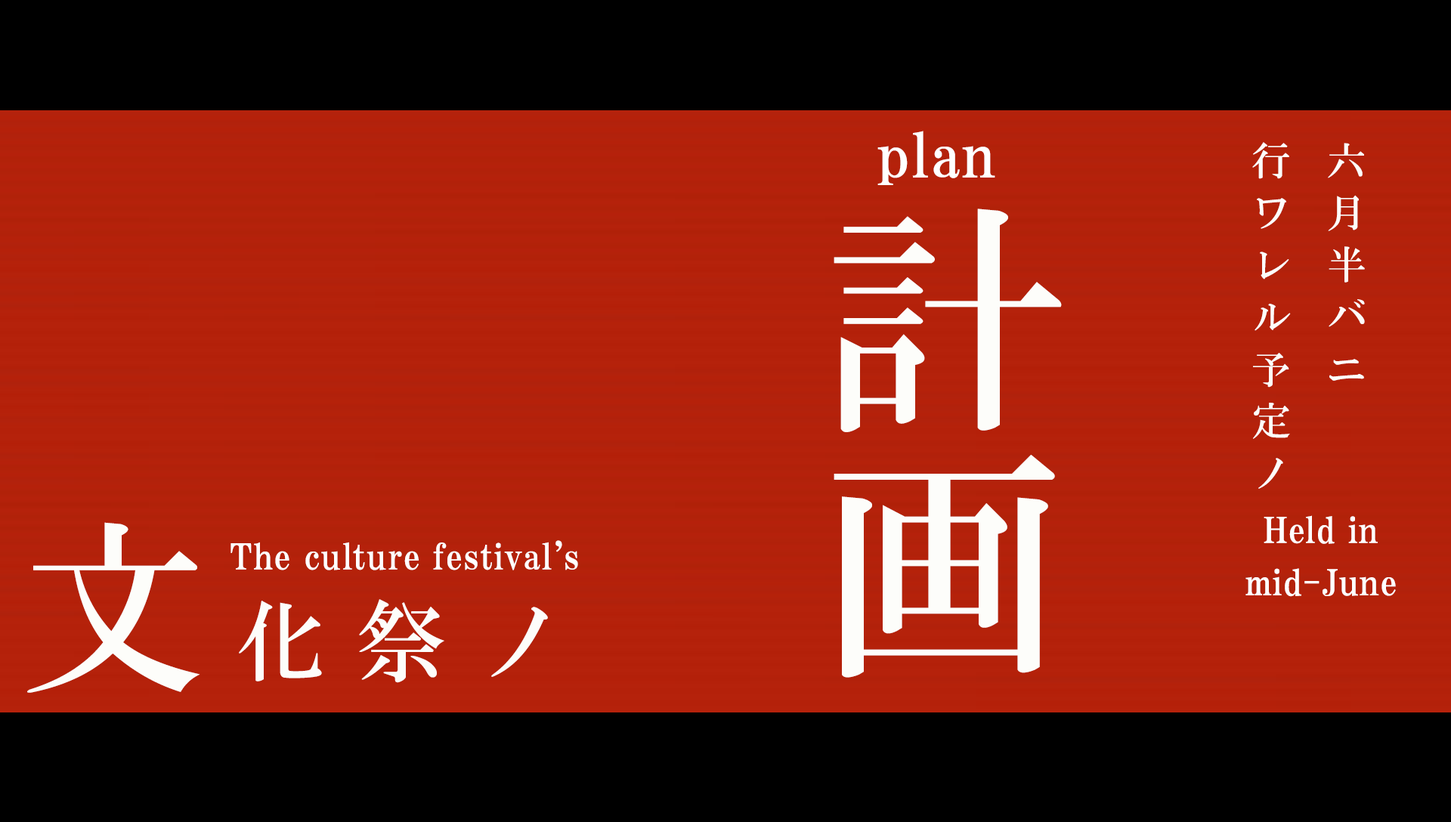
<style>
.page{position:relative;width:1451px;height:822px;background:#000000}
.page>*{position:absolute;margin:0}
.t1{font:60.4px "HGPMinchoE";letter-spacing:0.025em;color:#ffffff}
.t2{font:39.3px/52.1px "HGMinchoB";letter-spacing:0.21em;color:#fdfdfa}
.t3{font:243.3px/244px "HGMinchoB";letter-spacing:0.17em;color:#fdfdfa}
.t4{font:35.3px/52.4px "HGPMinchoE";letter-spacing:0.025em;color:#ffffff}
.t5{font:186.6px "HGMinchoB";color:#fdfdfa}
.t6{font:35.3px "HGPMinchoE";letter-spacing:0.025em;color:#ffffff}
.t7{font:89.9px "HGMinchoB";letter-spacing:0.33em;color:#fdfdfa}
</style>
<div class="page">
<p class="t1" style="left:877px;top:131px;width:118px;height:54px">plan</p>
<p class="t2" style="left:1252px;top:142px;width:112px;height:347px">行 六<br>ワ 月<br>レ 半<br>ル バ<br>予 ニ<br>定<br>ノ</p>
<p class="t3" style="left:833px;top:209px;width:229px;height:469px;text-align:center">計<br>画</p>
<p class="t4" style="left:1245px;top:515px;width:150px;height:82px;text-align:center">Held in<br>mid-June</p>
<p class="t5" style="left:27px;top:522px;width:173px;height:171px">文</p>
<p class="t6" style="left:230px;top:540px;width:348px;height:30px">The culture festival’s</p>
<p class="t7" style="left:239px;top:599px;width:309px;height:84px">化祭ノ</p>
</div>
